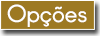
<style>
.page{position:relative;width:100px;height:36px;background:#9d7922}
.page>*{position:absolute;margin:0}
.t1{font:24px "Arcon-Regular";color:#ffffff}
</style>
<div class="page">
<p class="t1" style="left:7px;top:4px;width:80px;height:23px">Opções</p>
</div>
